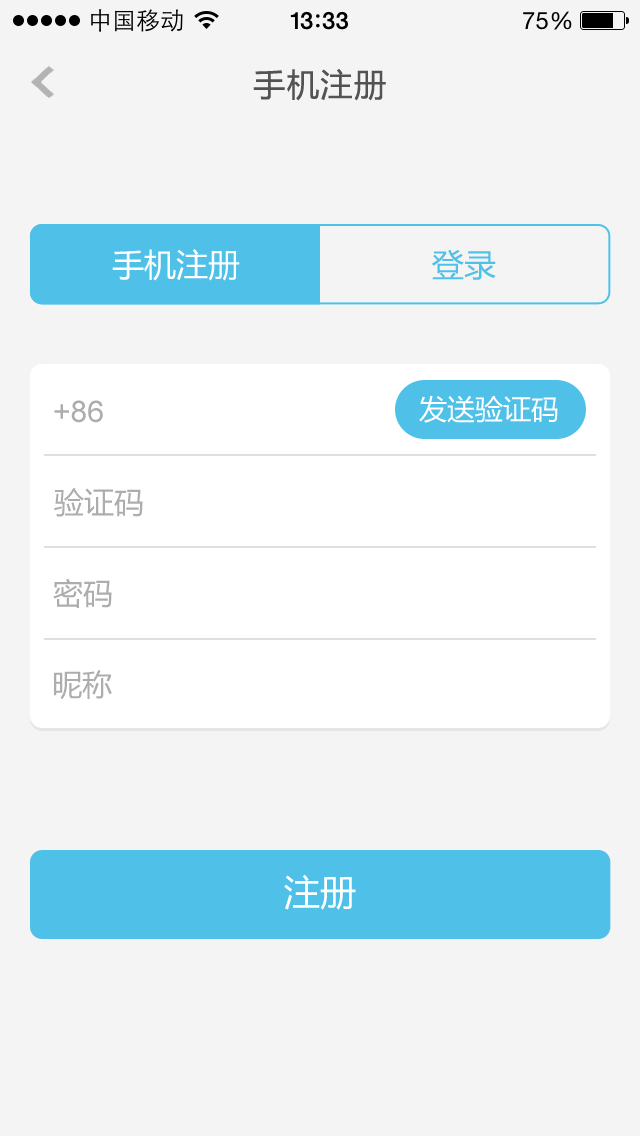
<style>
.page{position:relative;width:640px;height:1136px;background:#f4f4f4}
.page>*{position:absolute;margin:0}
.t1{font:32px "MicrosoftYaHei";letter-spacing:0.05em;color:#535353}
.t2{font:32px "MicrosoftYaHei";color:#ffffff}
.t3{font:32px "MicrosoftYaHei";color:#4fc1e9}
.t4{font:30px "ArialMT";color:#adadad}
.t5{font:28px "MicrosoftYaHei";color:#ffffff}
.t6{font:30px "MicrosoftYaHei";color:#adadad}
.t7{font:36px "MicrosoftYaHei";color:#ffffff}
</style>
<div class="page">
<p class="t1" style="left:253px;top:69px;width:133px;height:32px">手机注册</p>
<p class="t2" style="left:112px;top:249px;width:128px;height:32px">手机注册</p>
<p class="t3" style="left:432px;top:249px;width:64px;height:31px">登录</p>
<p class="t4" style="left:54px;top:400px;width:49px;height:23px">+86</p>
<p class="t5" style="left:419px;top:395px;width:139px;height:28px">发送验证码</p>
<p class="t6" style="left:54px;top:488px;width:89px;height:29px">验证码</p>
<p class="t6" style="left:53px;top:578px;width:59px;height:30px">密码</p>
<p class="t6" style="left:54px;top:670px;width:58px;height:30px">昵称</p>
<p class="t7" style="left:284px;top:874px;width:72px;height:36px">注册</p>
</div>
